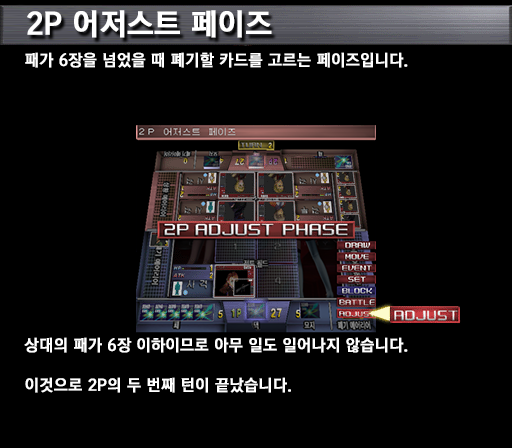
<style>
.page{position:relative;width:512px;height:448px;background:#000000}
.page>*{position:absolute;margin:0}
.t1{font:30px "KoreanGD15-R";color:#ffffff;font-weight:bold}
.t2{font:16px "KoreanGD15-R";color:#ffffff;font-weight:bold}
.t3{font:16px/20px "KoreanGD15-R";color:#ffffff;font-weight:bold}
</style>
<div class="page">
<p class="t1" style="left:27px;top:10px;width:245px;height:28px">2P 어저스트 페이즈</p>
<p class="t2" style="left:25px;top:52px;width:383px;height:16px">패가 6장을 넘었을 때 폐기할 카드를 고르는 페이즈입니다.</p>
<p class="t3" style="left:24px;top:337px;width:384px;height:56px">상대의 패가 6장 이하이므로 아무 일도 일어나지 않습니다.<br><br>이것으로 2P의 두 번째 턴이 끝났습니다.</p>
</div>
